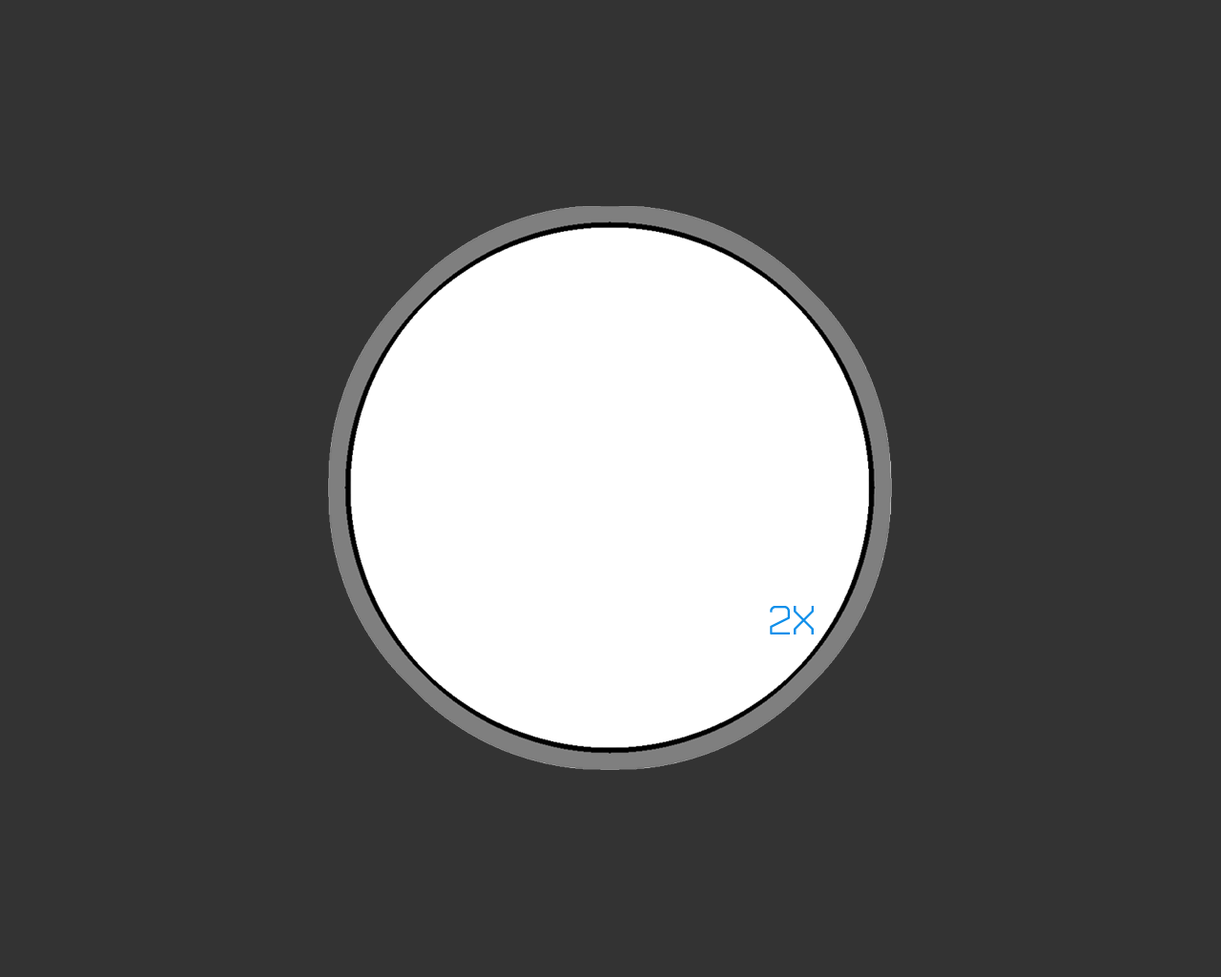
<style>
.page{position:relative;width:1221px;height:977px;background:#333333}
.page>*{position:absolute;margin:0}
.t1{font:41.1px "Arame-Thin";color:#108fea}
</style>
<div class="page">
<p class="t1" style="left:770px;top:606px;width:44px;height:28px">2x</p>
</div>
